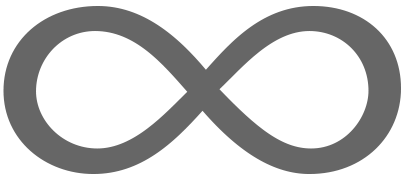
<style>
.page{position:relative;width:420px;height:180px;background:#ffffff}
.page>*{position:absolute;margin:0}
.t1{font:509.7px "CharlemagneStd-Bold";color:#666666;scale:1.1 1}
</style>
<div class="page">
<p class="t1" style="left:3px;top:6px;width:398px;height:168px">∞</p>
</div>
